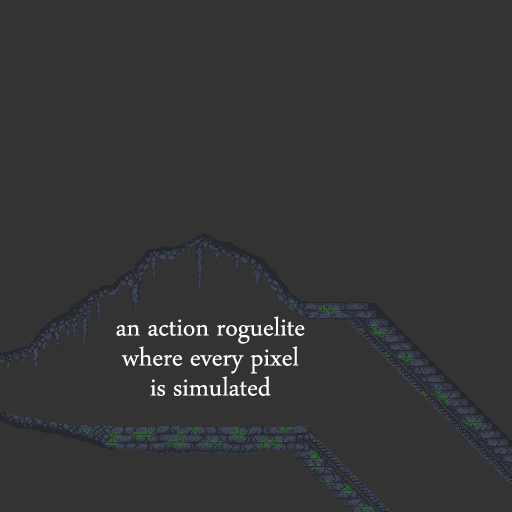
<style>
.page{position:relative;width:512px;height:512px;background:#333333}
.page>*{position:absolute;margin:0}
.t1{font:36px/30px "ArabicTypesetting";color:#ffffff}
</style>
<div class="page">
<p class="t1" style="left:116px;top:316px;width:189px;height:80px;text-align:center">an action roguelite<br>where every pixel <br>is simulated</p>
</div>
